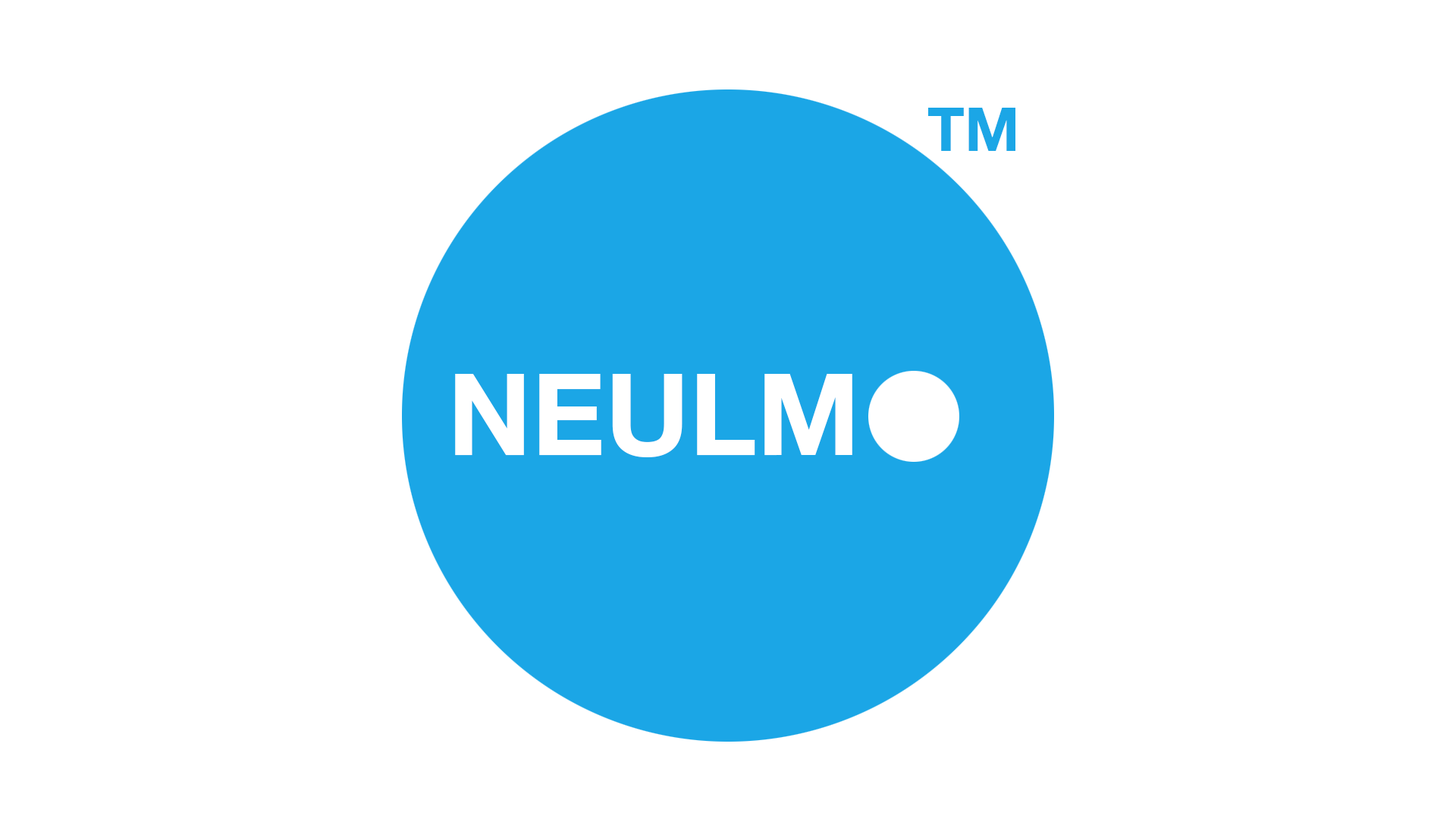
<style>
.page{position:relative;width:1456px;height:819px;background:#ffffff}
.page>*{position:absolute;margin:0}
.t1{font:60.7px "HelveticaNeue-Bold";color:#1ba6e6}
.t2{font:113.7px "HelveticaNeue-Bold";color:#ffffff}
</style>
<div class="page">
<p class="t1" style="left:928px;top:108px;width:87px;height:43px">TM</p>
<p class="t2" style="left:455px;top:374px;width:397px;height:83px">NEULM</p>
</div>
